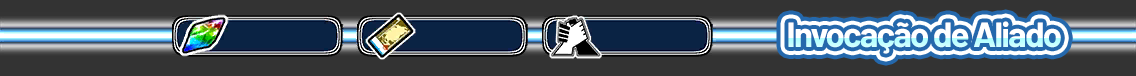
<style>
.page{position:relative;width:1136px;height:76px;background:#333333}
.page>*{position:absolute;margin:0}
.t1{font:34.7px "Barlow-Bold";letter-spacing:-0.05em}
</style>
<div class="page">
<p class="t1" style="left:788px;top:21px;width:273px;height:33px">Invocação de Aliado</p>
</div>
